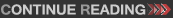
<style>
.page{position:relative;width:173px;height:18px;background:#333333}
.page>*{position:absolute;margin:0}
.t1{font:15px "Gautami-Bold";letter-spacing:-0.01em;color:#cdcdcd;scale:1.05 1}
.t2{font:15px "Gautami-Bold";letter-spacing:-0.01em;color:#9a9a9a;scale:1.05 1}
</style>
<div class="page">
<p class="t1" style="left:1px;top:4px;width:145px;height:11px"><span class="t2">C</span>ONTINUE <span class="t2">R</span>EADING</p>
</div>
